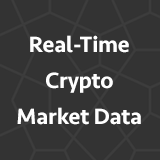
<style>
.page{position:relative;width:160px;height:160px;background:#333333}
.page>*{position:absolute;margin:0}
.t1{font:23px/36px "Seravek-Medium";letter-spacing:-0.01em;color:#ffffff}
</style>
<div class="page">
<p class="t1" style="left:17px;top:35px;width:124px;height:90px;text-align:center">Real-Time Crypto<br>Market Data</p>
</div>
